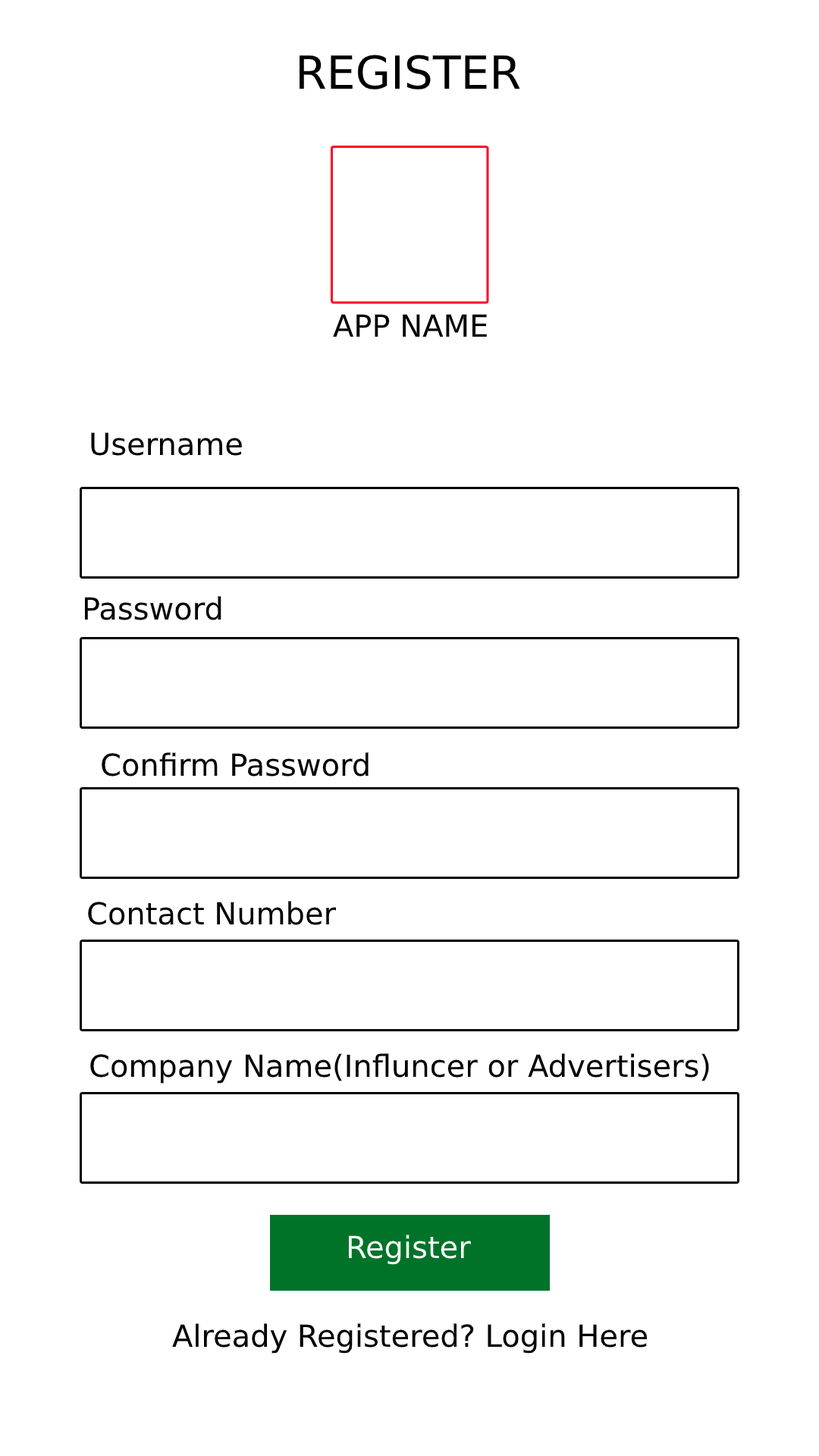
<style>
.page{position:relative;width:819px;height:1456px;background:#ffffff}
.page>*{position:absolute;margin:0}
.t1{font:45.5px "DejaVuSans";color:#000000}
.t2{font:30.3px "DejaVuSans";color:#000000}
.t3{font:30.3px "DejaVuSans";color:#ffffff}
</style>
<div class="page">
<p class="t1" style="left:299px;top:55px;width:221px;height:34px">REGISTER</p>
<p class="t2" style="left:333px;top:314px;width:154px;height:23px">APP NAME</p>
<p class="t2" style="left:91px;top:432px;width:151px;height:24px">Username</p>
<p class="t2" style="left:84px;top:596px;width:137px;height:24px">Password</p>
<p class="t2" style="left:102px;top:752px;width:267px;height:25px">Confirm Password</p>
<p class="t2" style="left:88px;top:901px;width:249px;height:24px">Contact Number</p>
<p class="t2" style="left:90px;top:1053px;width:619px;height:31px">Company Name(Influncer or Advertisers)</p>
<p class="t3" style="left:348px;top:1235px;width:123px;height:30px">Register</p>
<p class="t2" style="left:172px;top:1323px;width:476px;height:31px">Already Registered? Login Here</p>
</div>
